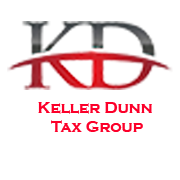
<style>
.page{position:relative;width:180px;height:180px;background:#ffffff}
.page>*{position:absolute;margin:0}
.t1{font:16px "CopperplateGothic-Bold";color:#fc002a}
</style>
<div class="page">
<p class="t1" style="left:38px;top:102px;width:114px;height:30px;text-align:center">Keller Dunn <br>Tax Group</p>
</div>
